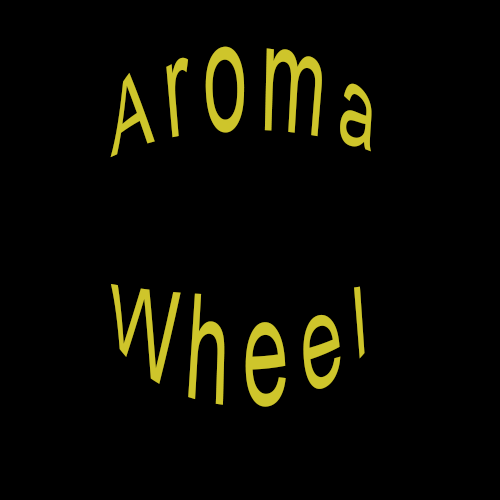
<style>
.page{position:relative;width:500px;height:500px;background:#000000}
.page>*{position:absolute;margin:0}
.t1{font:72px "ArialMT";letter-spacing:0.17em;color:#cec52b}
</style>
<div class="page">
<p class="t1" style="left:110px;top:46px;width:262px;height:112px">Aroma</p>
<p class="t1" style="left:111px;top:284px;width:254px;height:123px">Wheel</p>
</div>
